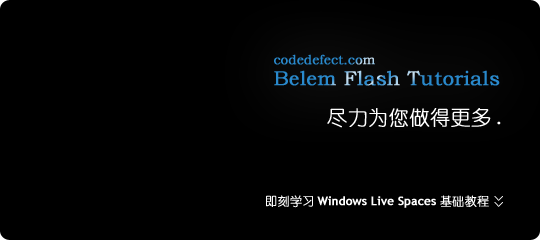
<style>
.page{position:relative;width:540px;height:240px;background:#000000}
.page>*{position:absolute;margin:0}
.t1{font:20px "BookmanOldStyle";color:#2989cc;font-weight:bold}
.t2{font:13px "BookmanOldStyle";color:#2989cc;font-weight:bold}
.t3{font:20px "YouYuan";color:#ffffff;font-weight:bold}
.t4{font:12px "TrebuchetMS";color:#ffffff;font-weight:bold}
.t5{font:12px "YouYuan";color:#ffffff;font-weight:bold}
.t6{font:12px "SimSun";font-weight:bold}
</style>
<div class="page">
<p class="t1" style="left:274px;top:54px;width:226px;height:32px"><span class="t2">codedefect.com<br></span>Belem Flash Tutorials</p>
<p class="t3" style="left:327px;top:108px;width:174px;height:20px">尽力为您做得更多.</p>
<p class="t4" style="left:266px;top:195px;width:223px;height:13px"><span class="t5">即刻学习</span>Windows Live Spaces <span class="t5">基础教程</span></p>
<p class="t6" style="left:494px;top:196px;width:9px;height:11px;rotate:91deg">&gt;&gt;</p>
</div>
